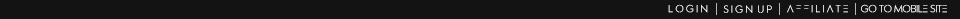
<style>
.page{position:relative;width:960px;height:19px;background:#131313}
.page>*{position:absolute;margin:0}
.t1{font:10px "Pasajero";color:#fefefe}
.t2{font:10px "Pasajero"}
</style>
<div class="page">
<p class="t1" style="left:668px;top:4px;width:40px;height:9px">L O G I N</p>
<p class="t1" style="left:723px;top:5px;width:49px;height:8px">S I G N  U P</p>
<p class="t2" style="left:787px;top:4px;width:61px;height:9px">A F F I L I A T E</p>
<p class="t1" style="left:861px;top:4px;width:86px;height:9px">GO TO MOBILE SITE</p>
</div>
